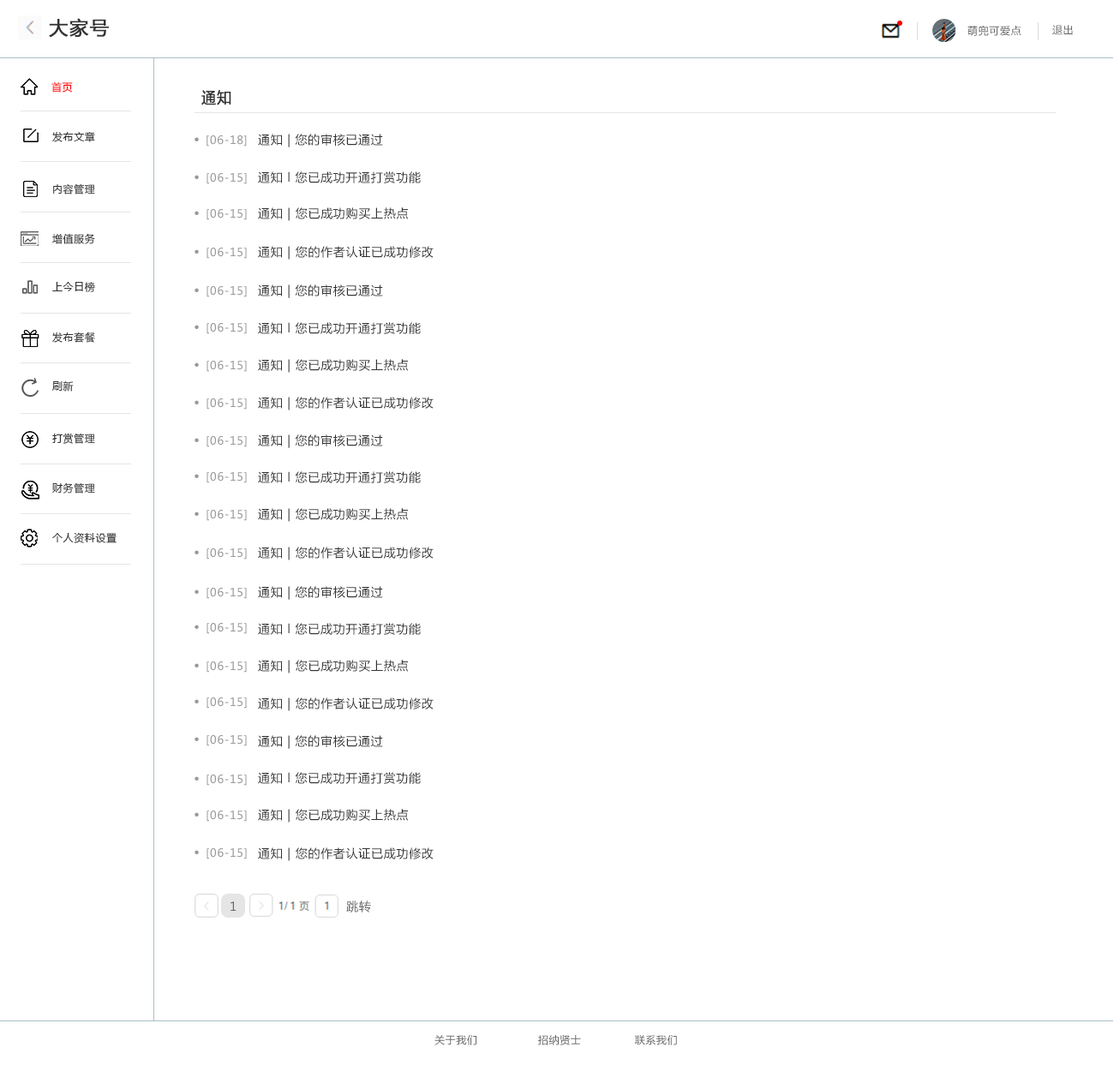
<style>
.page{position:relative;width:1114px;height:1071px;background:#ffffff}
.page>*{position:absolute;margin:0}
.t1{font:18.8px "MicrosoftYaHei";letter-spacing:0.05em;color:#333333;font-weight:bold}
.t2{font:10.3px "MicrosoftYaHei";letter-spacing:0.05em;color:#666666}
.t3{font:10.3px "MicrosoftYaHei";letter-spacing:0.05em;color:#ff0000}
.t4{font:15.4px "MicrosoftYaHei";letter-spacing:0.05em;color:#333333;font-weight:bold;scale:0.93 1}
.t5{font:10.3px "MicrosoftYaHei";letter-spacing:0.05em;color:#333333}
.t6{font:11.1px "MicrosoftYaHei";letter-spacing:0.05em;color:#999999}
.t7{font:13.7px "MicrosoftYaHei-Bold";letter-spacing:0.05em;color:#999999}
.t8{font:12px "MicrosoftYaHei";letter-spacing:0.05em;color:#333333}
.t9{font:12px "MicrosoftYaHei";letter-spacing:0.05em;color:#666666}
</style>
<div class="page">
<p class="t1" style="left:49px;top:18px;width:60px;height:20px">大家号</p>
<p class="t2" style="left:967px;top:26px;width:54px;height:10px">萌兜可爱点</p>
<p class="t2" style="left:1052px;top:25px;width:20px;height:10px">退出</p>
<p class="t3" style="left:51px;top:81px;width:22px;height:12px">首页</p>
<p class="t4" style="left:201px;top:90px;width:30px;height:15px">通知</p>
<p class="t5" style="left:52px;top:131px;width:43px;height:11px">发布文章</p>
<p class="t6" style="left:194px;top:135px;width:53px;height:11px"><span class="t7">· </span>[06-18]</p>
<p class="t8" style="left:258px;top:134px;width:125px;height:13px">通知 | 您的审核已通过</p>
<p class="t6" style="left:194px;top:173px;width:53px;height:11px"><span class="t7">· </span>[06-15]</p>
<p class="t8" style="left:258px;top:171px;width:163px;height:12px">通知 l 您已成功开通打赏功能</p>
<p class="t5" style="left:53px;top:183px;width:42px;height:11px">内容管理</p>
<p class="t6" style="left:194px;top:209px;width:53px;height:11px"><span class="t7">· </span>[06-15]</p>
<p class="t8" style="left:258px;top:207px;width:150px;height:14px">通知 | 您已成功购买上热点</p>
<p class="t5" style="left:52px;top:233px;width:43px;height:11px">增值服务</p>
<p class="t8" style="left:258px;top:246px;width:175px;height:14px">通知 | 您的作者认证已成功修改</p>
<p class="t6" style="left:194px;top:248px;width:53px;height:11px"><span class="t7">· </span>[06-15]</p>
<p class="t5" style="left:52px;top:281px;width:43px;height:11px">上今日榜</p>
<p class="t6" style="left:194px;top:286px;width:53px;height:11px"><span class="t7">· </span>[06-15]</p>
<p class="t8" style="left:258px;top:284px;width:125px;height:14px">通知 | 您的审核已通过</p>
<p class="t6" style="left:194px;top:323px;width:53px;height:11px"><span class="t7">· </span>[06-15]</p>
<p class="t8" style="left:258px;top:322px;width:163px;height:12px">通知 l 您已成功开通打赏功能</p>
<p class="t5" style="left:52px;top:332px;width:43px;height:11px">发布套餐</p>
<p class="t6" style="left:194px;top:361px;width:53px;height:11px"><span class="t7">· </span>[06-15]</p>
<p class="t8" style="left:258px;top:359px;width:150px;height:14px">通知 | 您已成功购买上热点</p>
<p class="t5" style="left:52px;top:381px;width:22px;height:10px">刷新</p>
<p class="t6" style="left:194px;top:398px;width:53px;height:11px"><span class="t7">· </span>[06-15]</p>
<p class="t8" style="left:258px;top:397px;width:175px;height:13px">通知 | 您的作者认证已成功修改</p>
<p class="t5" style="left:52px;top:433px;width:43px;height:11px">打赏管理</p>
<p class="t6" style="left:194px;top:436px;width:53px;height:11px"><span class="t7">· </span>[06-15]</p>
<p class="t8" style="left:258px;top:434px;width:125px;height:14px">通知 | 您的审核已通过</p>
<p class="t6" style="left:194px;top:472px;width:53px;height:11px"><span class="t7">· </span>[06-15]</p>
<p class="t8" style="left:258px;top:471px;width:163px;height:12px">通知 l 您已成功开通打赏功能</p>
<p class="t5" style="left:52px;top:482px;width:43px;height:11px">财务管理</p>
<p class="t6" style="left:194px;top:510px;width:53px;height:11px"><span class="t7">· </span>[06-15]</p>
<p class="t8" style="left:258px;top:508px;width:150px;height:14px">通知 | 您已成功购买上热点</p>
<p class="t5" style="left:52px;top:532px;width:65px;height:11px">个人资料设置</p>
<p class="t6" style="left:194px;top:548px;width:53px;height:11px"><span class="t7">· </span>[06-15]</p>
<p class="t8" style="left:258px;top:547px;width:175px;height:13px">通知 | 您的作者认证已成功修改</p>
<p class="t6" style="left:194px;top:588px;width:53px;height:11px"><span class="t7">· </span>[06-15]</p>
<p class="t8" style="left:258px;top:586px;width:125px;height:14px">通知 | 您的审核已通过</p>
<p class="t6" style="left:194px;top:623px;width:53px;height:11px"><span class="t7">· </span>[06-15]</p>
<p class="t8" style="left:258px;top:623px;width:163px;height:12px">通知 l 您已成功开通打赏功能</p>
<p class="t6" style="left:194px;top:661px;width:53px;height:11px"><span class="t7">· </span>[06-15]</p>
<p class="t8" style="left:258px;top:660px;width:150px;height:13px">通知 | 您已成功购买上热点</p>
<p class="t6" style="left:194px;top:697px;width:53px;height:11px"><span class="t7">· </span>[06-15]</p>
<p class="t8" style="left:258px;top:697px;width:175px;height:14px">通知 | 您的作者认证已成功修改</p>
<p class="t6" style="left:194px;top:735px;width:53px;height:11px"><span class="t7">· </span>[06-15]</p>
<p class="t8" style="left:258px;top:735px;width:125px;height:14px">通知 | 您的审核已通过</p>
<p class="t8" style="left:258px;top:772px;width:163px;height:12px">通知 l 您已成功开通打赏功能</p>
<p class="t6" style="left:194px;top:774px;width:53px;height:12px"><span class="t7">· </span>[06-15]</p>
<p class="t8" style="left:258px;top:809px;width:150px;height:13px">通知 | 您已成功购买上热点</p>
<p class="t6" style="left:194px;top:810px;width:53px;height:12px"><span class="t7">· </span>[06-15]</p>
<p class="t6" style="left:194px;top:848px;width:53px;height:11px"><span class="t7">· </span>[06-15]</p>
<p class="t8" style="left:258px;top:847px;width:175px;height:14px">通知 | 您的作者认证已成功修改</p>
<p class="t9" style="left:230px;top:901px;width:6px;height:10px">1</p>
<p class="t9" style="left:346px;top:900px;width:25px;height:12px">跳转</p>
<p class="t2" style="left:434px;top:1035px;width:243px;height:10px">关于我们                 招纳贤士               联系我们</p>
</div>
